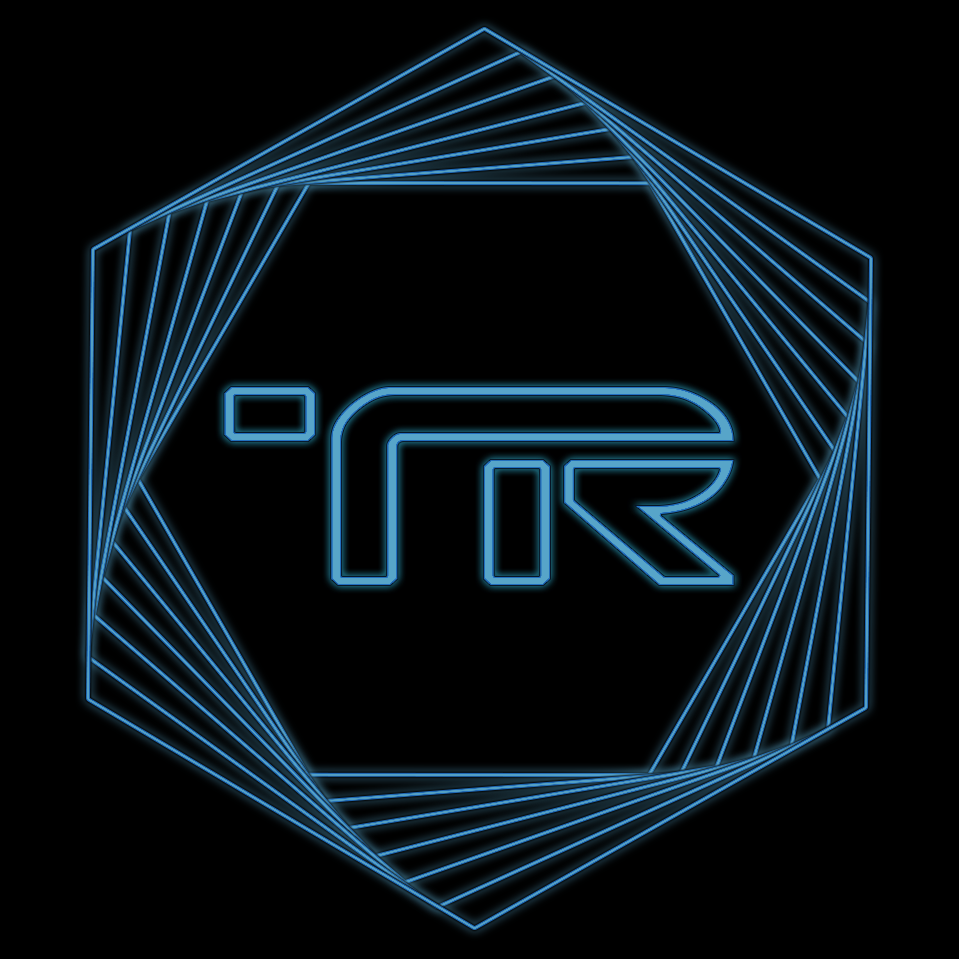
<style>
.page{position:relative;width:959px;height:959px;background:#000000}
.page>*{position:absolute;margin:0}
.t1{font:284.6px "TRN";scale:1.18 1}
</style>
<div class="page">
<p class="t1" style="left:223px;top:386px;width:512px;height:200px">TR</p>
<p class="t1" style="left:223px;top:386px;width:512px;height:200px">TR</p>
</div>
